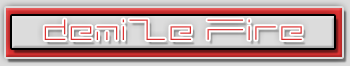
<style>
.page{position:relative;width:350px;height:66px}
.page>*{position:absolute;margin:0}
.t1{font:40px "MINIMALHARD2";color:#e23333}
</style>
<div class="page">
<p class="t1" style="left:44px;top:19px;width:258px;height:21px">demiZe Fire</p>
</div>
